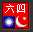
<style>
.page{position:relative;width:33px;height:32px;background:#333333}
.page>*{position:absolute;margin:0}
.t1{font:10.4px "SimSun";color:#ffffff}
</style>
<div class="page">
<p class="t1" style="left:5px;top:4px;width:20px;height:9px">六四</p>
</div>
